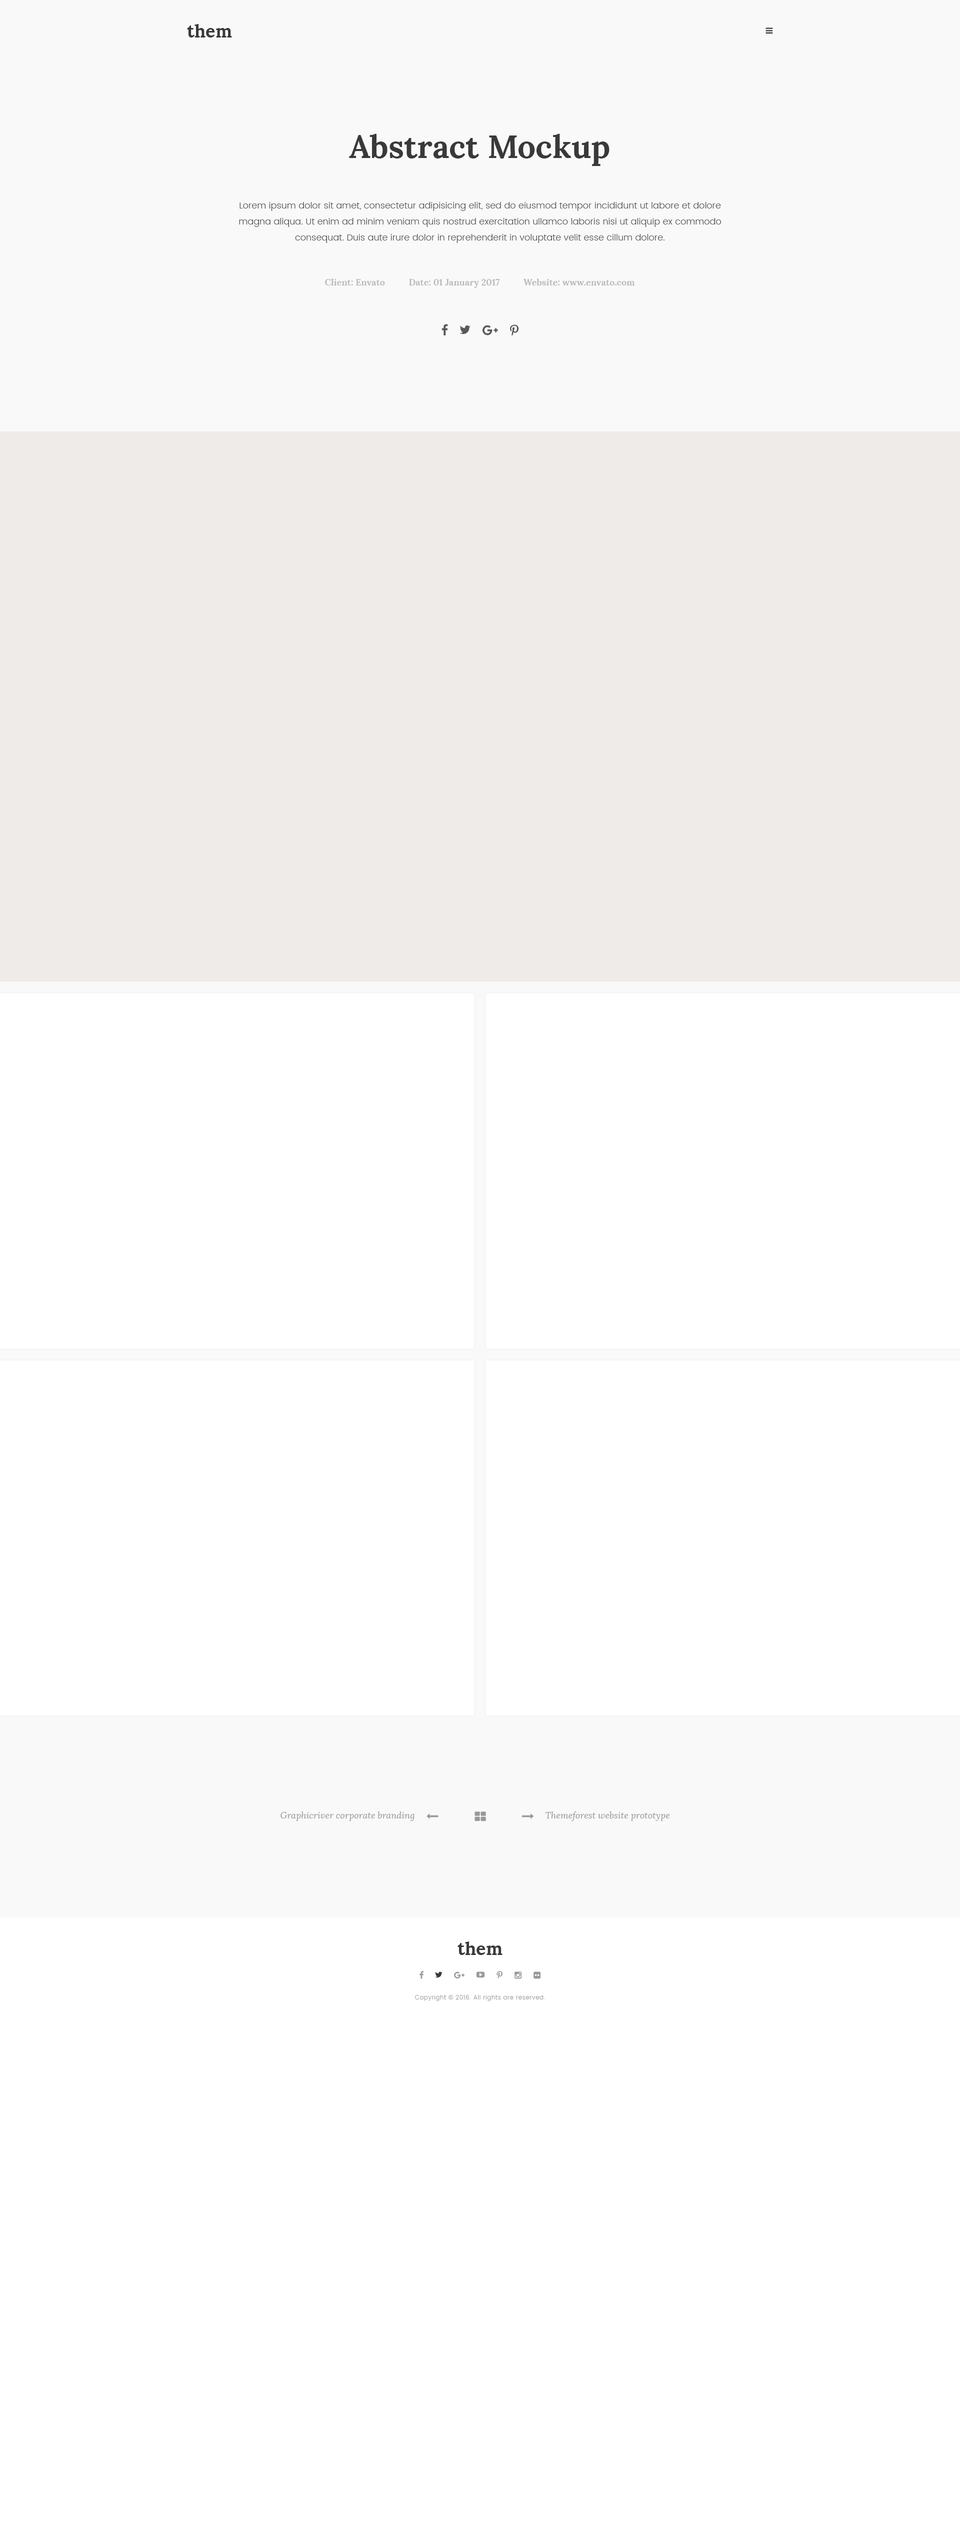
<style>
.page{position:relative;width:960px;height:2524px;background:#ffffff}
.page>*{position:absolute;margin:0}
.t1{font:18px "Lora-Bold";color:#393939}
.t2{font:32px "Lora-Bold";color:#393939}
.t3{font:9px/16px "Poppins-Light";color:#595959}
.t4{font:9px "Lora-Bold";color:#b9b9b9}
.t5{font:9px "Lora-Italic";color:#999999}
.t6{font:6px "Poppins-Light";letter-spacing:0.05em;color:#999999}
.t7{font:6px "OpenSans";letter-spacing:0.05em;color:#999999}
</style>
<div class="page">
<p class="t1" style="left:187px;top:24px;width:45px;height:14px">them</p>
<p class="t2" style="left:349px;top:134px;width:261px;height:32px">Abstract Mockup</p>
<p class="t3" style="left:239px;top:202px;width:483px;height:41px;text-align:center">Lorem ipsum dolor sit amet, consectetur adipisicing elit, sed do eiusmod tempor incididunt ut labore et dolore magna aliqua. Ut enim ad minim veniam quis nostrud exercitation ullamco laboris nisi ut aliquip ex commodo consequat. Duis aute irure dolor in reprehenderit in voluptate velit esse cillum dolore.</p>
<p class="t4" style="left:325px;top:278px;width:310px;height:10px">Client: Envato          Date: 01 January 2017          Website: www.envato.com</p>
<p class="t5" style="left:280px;top:1812px;width:134px;height:9px">Graphicriver corporate branding</p>
<p class="t5" style="left:546px;top:1812px;width:124px;height:9px">Themeforest website prototype</p>
<p class="t1" style="left:458px;top:1942px;width:44px;height:13px">them</p>
<p class="t6" style="left:415px;top:1995px;width:130px;height:6px">Copyright <span class="t7">© </span>2016. All rights are reserved.</p>
</div>
